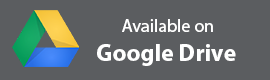
<style>
.page{position:relative;width:270px;height:80px;background:#5b5d60}
.page>*{position:absolute;margin:0}
.t1{font:18px "MyriadHebrew-Regular";color:#ffffff}
.t2{font:24px "MyriadHebrew-Bold";color:#ffffff}
</style>
<div class="page">
<p class="t1" style="left:97px;top:19px;width:139px;height:47px;text-align:center">Available on <br><span class="t2">Google Drive</span></p>
</div>
